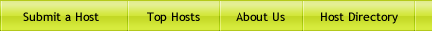
<style>
.page{position:relative;width:432px;height:32px}
.page>*{position:absolute;margin:0}
.t1{font:12px "TrebuchetMS";color:#000000}
</style>
<div class="page">
<p class="t1" style="left:23px;top:12px;width:76px;height:9px">Submit a Host</p>
<p class="t1" style="left:147px;top:12px;width:53px;height:12px">Top Hosts</p>
<p class="t1" style="left:236px;top:12px;width:49px;height:9px">About Us</p>
<p class="t1" style="left:321px;top:12px;width:77px;height:12px">Host Directory</p>
</div>
